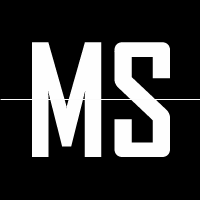
<style>
.page{position:relative;width:200px;height:200px;background:#000000}
.page>*{position:absolute;margin:0}
.t1{font:150px "AgencyFB-Bold";color:#fefefe}
</style>
<div class="page">
<p class="t1" style="left:32px;top:42px;width:138px;height:115px">MS</p>
</div>
